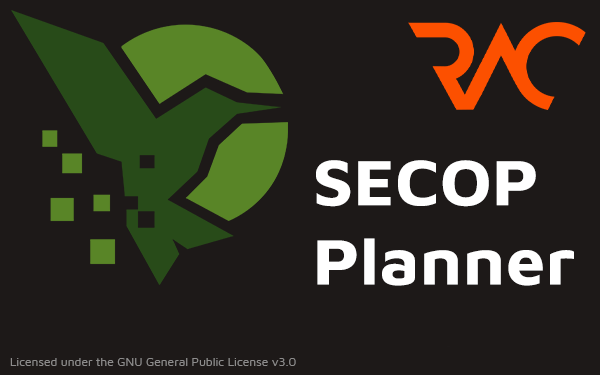
<style>
.page{position:relative;width:600px;height:375px;background:#1d1918}
.page>*{position:absolute;margin:0}
.t1{font:66px "MavenPro-Bold";color:#ffffff;scale:1.07 1}
</style>
<div class="page">
<p class="t1" style="left:316px;top:160px;width:258px;height:126px">SECOP <br>Planner</p>
</div>
